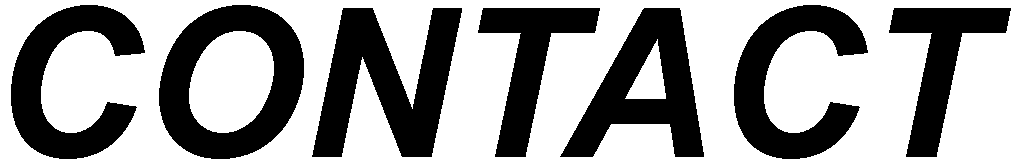
<style>
.page{position:relative;width:1016px;height:160px;background:#ffffff}
.page>*{position:absolute;margin:0}
.t1{font:208px "Arial-BoldItalicMT";color:#000000}
</style>
<div class="page">
<p class="t1" style="left:11px;top:5px;width:1000px;height:154px">CONTACT</p>
</div>
